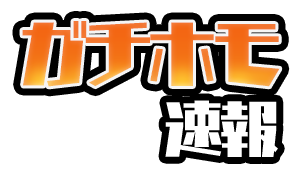
<style>
.page{position:relative;width:300px;height:179px;background:#ffffff}
.page>*{position:absolute;margin:0}
.t1{font:68.1px "CaratStd-UB";letter-spacing:-0.05em;color:#f37825}
.t2{font:58.3px "CaratStd-UB";letter-spacing:-0.05em;color:#ffffff}
</style>
<div class="page">
<p class="t1" style="left:22px;top:21px;width:258px;height:66px">ガチホモ</p>
<p class="t2" style="left:165px;top:100px;width:113px;height:57px">速報</p>
</div>
